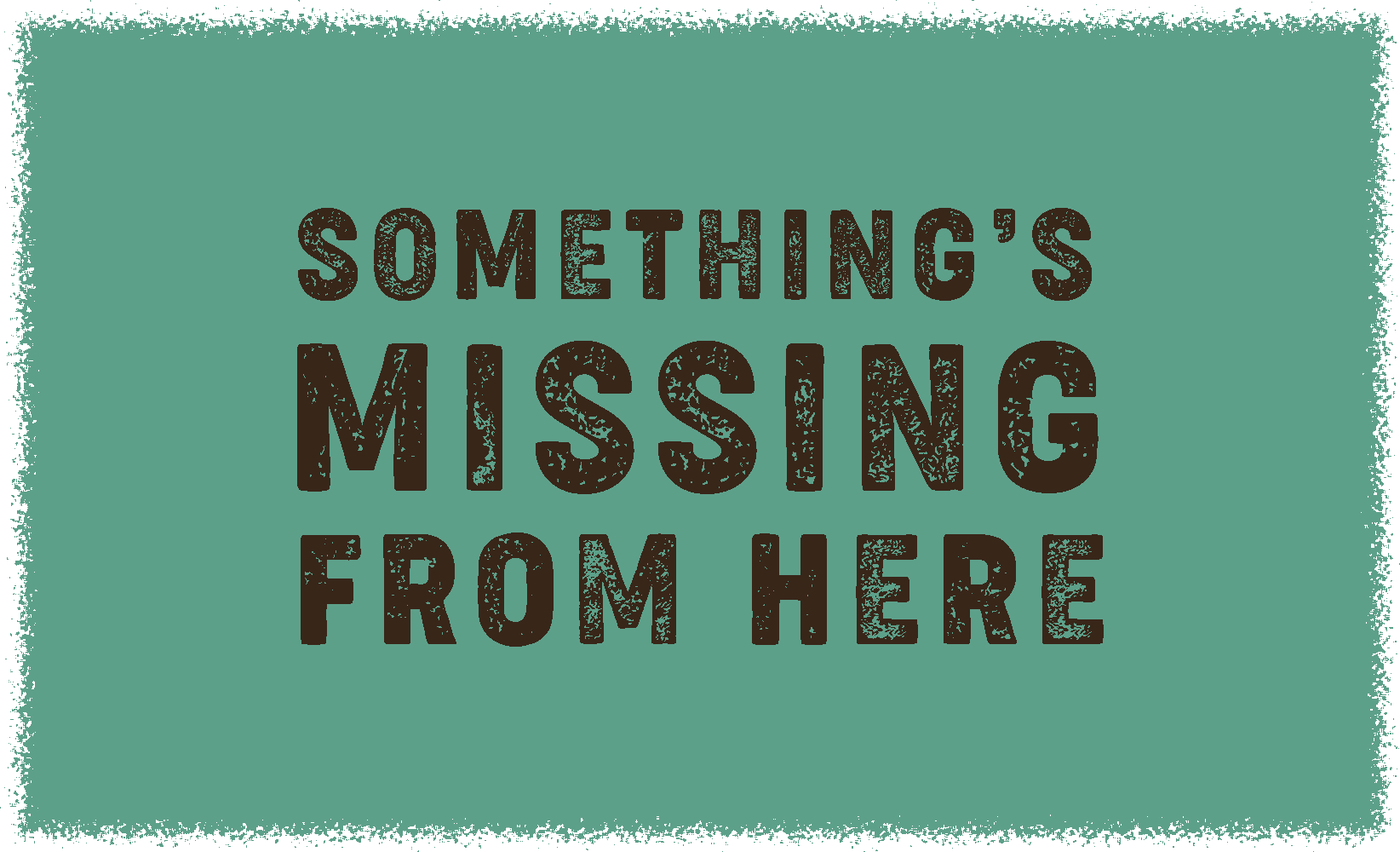
<style>
.page{position:relative;width:1400px;height:852px;background:#5da08a}
.page>*{position:absolute;margin:0}
.t1{font:120.4px "CocogooseCondensed-Letterpress";letter-spacing:0.08em;color:#382619}
.t2{font:197.2px "CocogooseCondensed-Letterpress";letter-spacing:0.08em;color:#382619}
.t3{font:147.1px "CocogooseCondensed-Letterpress";letter-spacing:0.08em;color:#382619}
</style>
<div class="page">
<p class="t1" style="left:298px;top:208px;width:794px;height:93px">SOMETHING’S</p>
<p class="t2" style="left:297px;top:341px;width:802px;height:153px">MISSING</p>
<p class="t3" style="left:301px;top:532px;width:803px;height:114px">FROM HERE</p>
</div>
